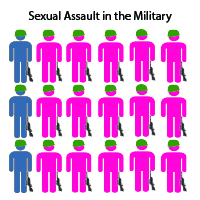
<style>
.page{position:relative;width:200px;height:200px;background:#ffffff}
.page>*{position:absolute;margin:0}
.t1{font:12px "MyriadPro-Regular";color:#060808}
</style>
<div class="page">
<p class="t1" style="left:28px;top:11px;width:144px;height:12px">Sexual Assault in the Military</p>
</div>
